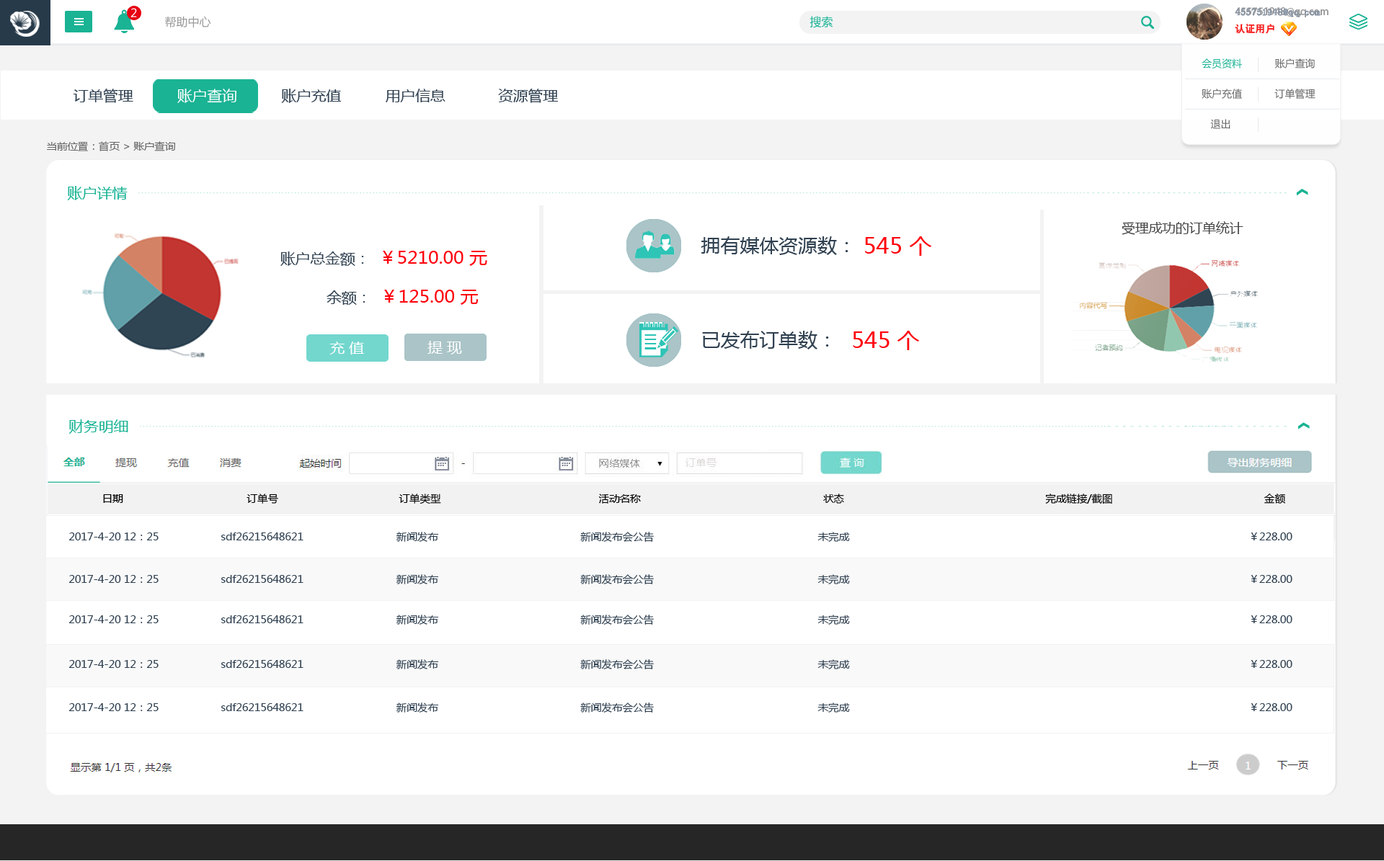
<style>
.page{position:relative;width:1384px;height:861px;background:#ffffff}
.page>*{position:absolute;margin:0}
.t1{font:11.5px "MicrosoftYaHei";color:#ffffff}
.t2{font:11.5px "MicrosoftYaHei";color:#999999}
.t3{font:11.5px "MicrosoftYaHei";color:#1ab394}
.t4{font:10.1px/17.3px "AdobeHeitiStd-Regular";color:#999999}
.t5{font:10.1px/17.3px "AdobeHeitiStd-Regular";color:#f61e1e}
.t6{font:10.1px/17.3px "AdobeHeitiStd-Regular";color:#ffffff}
.t7{font:10.1px/17.3px "SimSun";color:#8894a4;font-weight:bold}
.t8{font:10.1px/17.3px "SimSun";color:#f61e1e}
.t9{font:10.1px/30.3px "MicrosoftYaHei";color:#666666}
.t10{font:10.1px/30.3px "MicrosoftYaHei";color:#1ab394}
.t11{font:14.4px "MicrosoftYaHei";color:#2f4050;scale:1.04 1}
.t12{font:14.4px "MicrosoftYaHei";color:#ffffff;scale:1.04 1}
.t13{font:10.1px "MicrosoftYaHei";color:#666666;scale:1.04 1}
.t14{font:14.4px "MicrosoftYaHei";color:#1ab394;scale:1.04 1}
.t15{font:13px "MicrosoftYaHei";color:#474747;scale:1.04 1}
.t16{font:18.7px "MicrosoftYaHei";color:#2f4050;scale:1.04 1}
.t17{font:21.6px "MicrosoftYaHei";color:#ff000c;scale:1.04 1}
.t18{font:17.3px "MicrosoftYaHei";color:#ff000c;scale:1.04 1}
.t19{font:10.1px "MicrosoftYaHei";color:#000000;scale:1.04 1}
.t20{font:10.1px "MicrosoftYaHei";color:#2f4050;scale:1.04 1}
</style>
<div class="page">
<p class="t1" style="left:130px;top:8px;width:7px;height:9px">2</p>
<p class="t2" style="left:165px;top:16px;width:46px;height:12px">帮助中心</p>
<p class="t3" style="left:810px;top:16px;width:23px;height:12px">搜索</p>
<p class="t4" style="left:1235px;top:7px;width:94px;height:27px">455751948@qq.com<br><span class="t5">认证用户               </span><span class="t6">退出</span></p>
<p class="t7" style="left:1235px;top:8px;width:86px;height:26px">455751948@qq.com<br><span class="t8">认证用户</span></p>
<p class="t9" style="left:1202px;top:58px;width:114px;height:71px"><span class="t10">会员资料</span>           账户查询<br>账户充值           订单管理           <br>   退出</p>
<p class="t11" style="left:73px;top:89px;width:486px;height:14px">订单管理         <span class="t12"> 账户查询          </span>账户充值          用户信息            资源管理</p>
<p class="t13" style="left:47px;top:141px;width:128px;height:10px">当前位置：首页 &gt; 账户查询</p>
<p class="t14" style="left:67px;top:186px;width:61px;height:14px">账户详情</p>
<p class="t15" style="left:1122px;top:221px;width:122px;height:14px">受理成功的订单统计</p>
<p class="t16" style="left:701px;top:236px;width:148px;height:19px">拥有媒体资源数：</p>
<p class="t17" style="left:865px;top:236px;width:67px;height:20px">545 个</p>
<p class="t18" style="left:280px;top:251px;width:207px;height:15px"><span class="t11">账户总金额：  </span>￥5210.00 元</p>
<p class="t18" style="left:327px;top:290px;width:152px;height:15px"><span class="t11">余额：  </span>￥125.00 元</p>
<p class="t12" style="left:329px;top:342px;width:35px;height:13px">充 值</p>
<p class="t12" style="left:428px;top:341px;width:34px;height:14px">提 现</p>
<p class="t16" style="left:702px;top:331px;width:127px;height:19px">已发布订单数：</p>
<p class="t17" style="left:853px;top:331px;width:67px;height:19px">545 个</p>
<p class="t14" style="left:68px;top:420px;width:60px;height:14px">财务明细</p>
<p class="t19" style="left:103px;top:494px;width:1182px;height:11px">日期                                        订单号                                       订单类型                                                   活动名称                                                           状态                                                                 完成链接/截图                                                 金额</p>
<p class="t20" style="left:68px;top:532px;width:1225px;height:10px">2017-4-20 12：25                    sdf26215648621                              新闻发布                                              新闻发布会公告                                                     未完成                                                                                                                                 ￥228.00</p>
<p class="t20" style="left:68px;top:575px;width:1225px;height:10px">2017-4-20 12：25                    sdf26215648621                              新闻发布                                              新闻发布会公告                                                     未完成                                                                                                                                 ￥228.00</p>
<p class="t20" style="left:68px;top:615px;width:1225px;height:10px">2017-4-20 12：25                    sdf26215648621                              新闻发布                                              新闻发布会公告                                                     未完成                                                                                                                                 ￥228.00</p>
<p class="t20" style="left:68px;top:660px;width:1225px;height:10px">2017-4-20 12：25                    sdf26215648621                              新闻发布                                              新闻发布会公告                                                     未完成                                                                                                                                 ￥228.00</p>
<p class="t20" style="left:68px;top:703px;width:1225px;height:10px">2017-4-20 12：25                    sdf26215648621                              新闻发布                                              新闻发布会公告                                                     未完成                                                                                                                                 ￥228.00</p>
</div>
